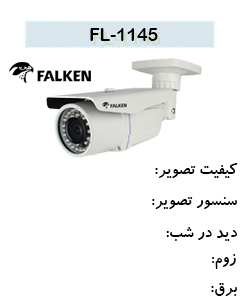
<style>
.page{position:relative;width:240px;height:300px;background:#ffffff}
.page>*{position:absolute;margin:0}
.t1{font:17.6px "ArialRoundedMTBold";color:#000000}
.t2{font:17.6px "BKoodakBold";color:#000000}
</style>
<div class="page">
<p class="t1" style="left:90px;top:28px;width:68px;height:13px">1145-FL</p>
<p class="t2" style="left:155px;top:163px;width:83px;height:15px">کیفیت تصویر:</p>
<p class="t2" style="left:152px;top:197px;width:85px;height:12px">سنسور تصویر:</p>
<p class="t2" style="left:166px;top:227px;width:72px;height:14px">دید در شب:</p>
<p class="t2" style="left:212px;top:254px;width:24px;height:15px">زوم:</p>
<p class="t2" style="left:211px;top:283px;width:26px;height:13px">برق:</p>
</div>
